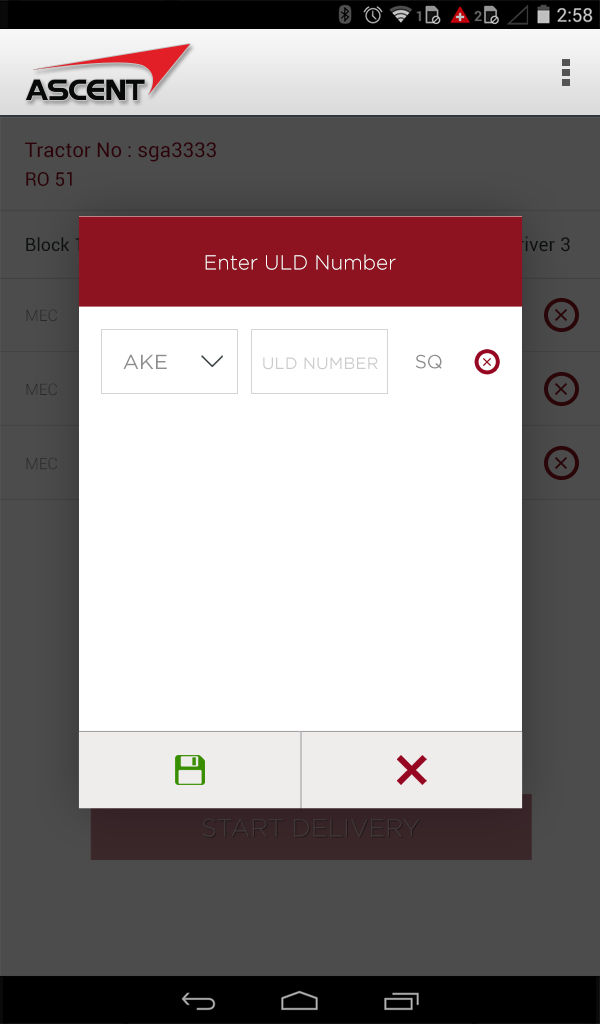
<style>
.page{position:relative;width:600px;height:1024px;background:#ffffff}
.page>*{position:absolute;margin:0}
.t1{font:20.4px "Roboto-Regular";color:#2d020a}
.t2{font:19px "Roboto-Regular";color:#2d020a}
.t3{font:19px "Roboto-Regular"}
.t4{font:20.5px "Gotham-Light";color:#ffffff}
.t5{font:15.8px "Roboto-Light";color:#292929}
.t6{font:20.5px "Gotham-Book";color:#8e8e8e}
.t7{font:16.5px "Gotham-Book";color:#cbcbcb}
.t8{font:18.8px "Gotham-Book";color:#8e8e8e}
.t9{font:15.8px "Roboto-Light";color:#2a2a2a}
.t10{font:25.1px "Gotham-Light";color:#3f3739}
</style>
<div class="page">
<p class="t1" style="left:25px;top:142px;width:191px;height:20px">Tractor No : sga3333</p>
<p class="t2" style="left:26px;top:172px;width:46px;height:14px">RO 51</p>
<p class="t3" style="left:506px;top:236px;width:64px;height:16px">Driver 3</p>
<p class="t4" style="left:205px;top:254px;width:191px;height:16px">Enter ULD Number</p>
<p class="t5" style="left:26px;top:309px;width:31px;height:12px">MEC</p>
<p class="t6" style="left:123px;top:354px;width:44px;height:15px">AKE</p>
<p class="t7" style="left:263px;top:357px;width:115px;height:13px">ULD NUMBER</p>
<p class="t8" style="left:415px;top:354px;width:27px;height:15px">SQ</p>
<p class="t5" style="left:26px;top:383px;width:31px;height:12px">MEC</p>
<p class="t9" style="left:26px;top:457px;width:31px;height:13px">MEC</p>
<p class="t10" style="left:202px;top:818px;width:218px;height:19px">START DELIVERY</p>
</div>
